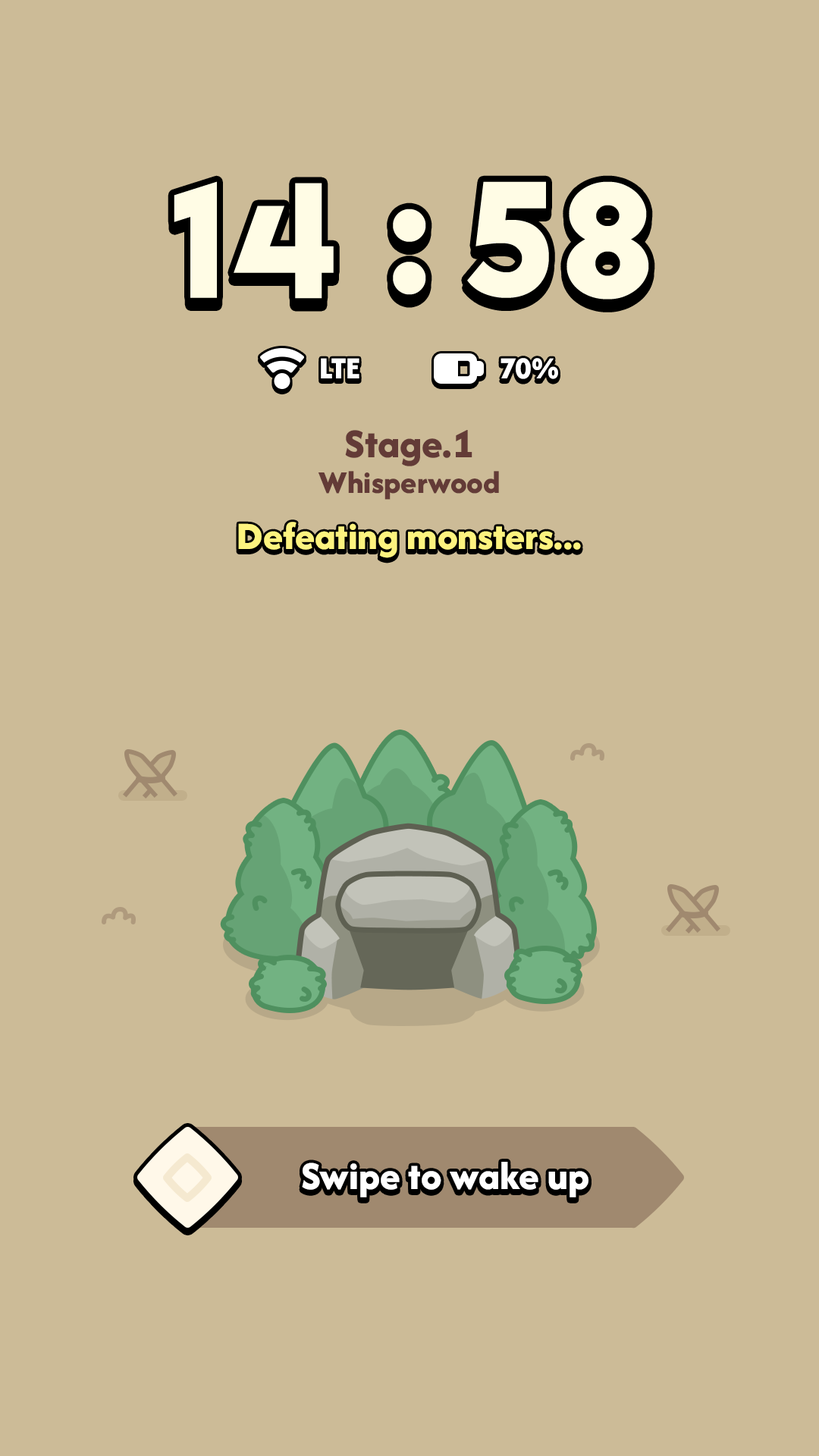
<style>
.page{position:relative;width:819px;height:1456px;background:#ccbb97}
.page>*{position:absolute;margin:0}
.t1{font:170.6px "LTAvocado-Bold";letter-spacing:0.02em;color:#fffce5}
.t2{font:31.8px "AfacadFlux-ExtraBold";color:#ffffff}
.t3{font:42.5px "AfacadFlux-ExtraBold";color:#633b37}
.t4{font:32.6px "AfacadFlux-ExtraBold";color:#633b37}
.t5{font:40.2px "AfacadFlux-ExtraBold";color:#fdf37f}
.t6{font:40.9px "AfacadFlux-ExtraBold";color:#ffffff}
</style>
<div class="page">
<p class="t1" style="left:174px;top:181px;width:160px;height:118px">14</p>
<p class="t1" style="left:467px;top:181px;width:182px;height:119px">58</p>
<p class="t1" style="left:393px;top:209px;width:33px;height:86px">:</p>
<p class="t2" style="left:321px;top:358px;width:38px;height:20px">LTE</p>
<p class="t2" style="left:500px;top:358px;width:58px;height:21px">70%</p>
<p class="t3" style="left:345px;top:430px;width:127px;height:36px">Stage.1</p>
<p class="t4" style="left:318px;top:471px;width:181px;height:29px">Whisperwood</p>
<p class="t5" style="left:238px;top:522px;width:343px;height:36px">Defeating monsters...</p>
<p class="t6" style="left:302px;top:1162px;width:286px;height:35px">Swipe to wake up</p>
</div>
